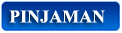
<style>
.page{position:relative;width:122px;height:33px}
.page>*{position:absolute;margin:0}
.t1{font:18px "TimesNewRomanPS-BoldMT";color:#fefdfd}
</style>
<div class="page">
<p class="t1" style="left:9px;top:10px;width:96px;height:13px">PINJAMAN</p>
</div>
